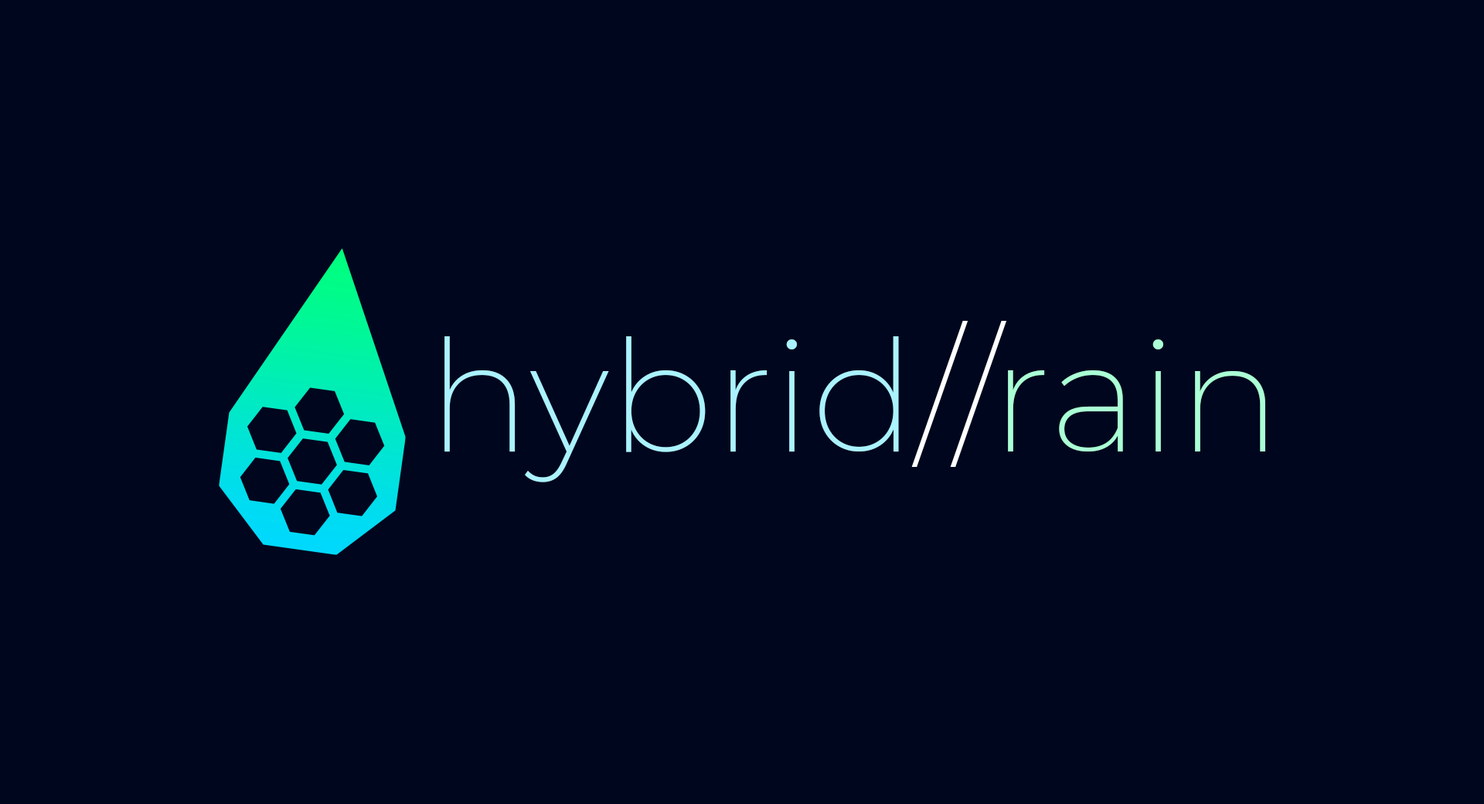
<style>
.page{position:relative;width:1484px;height:804px;background:#00061e}
.page>*{position:absolute;margin:0}
.t1{font:154.6px "Montserrat-ExtraLight";color:#abf2ff}
.t2{font:154.6px "Montserrat-ExtraLight";color:#ffffff}
.t3{font:154.6px "Montserrat-ExtraLight";color:#abffd5}
</style>
<div class="page">
<p class="t1" style="left:444px;top:321px;width:821px;height:161px">hybrid<span class="t2">//</span><span class="t3">rain</span></p>
</div>
